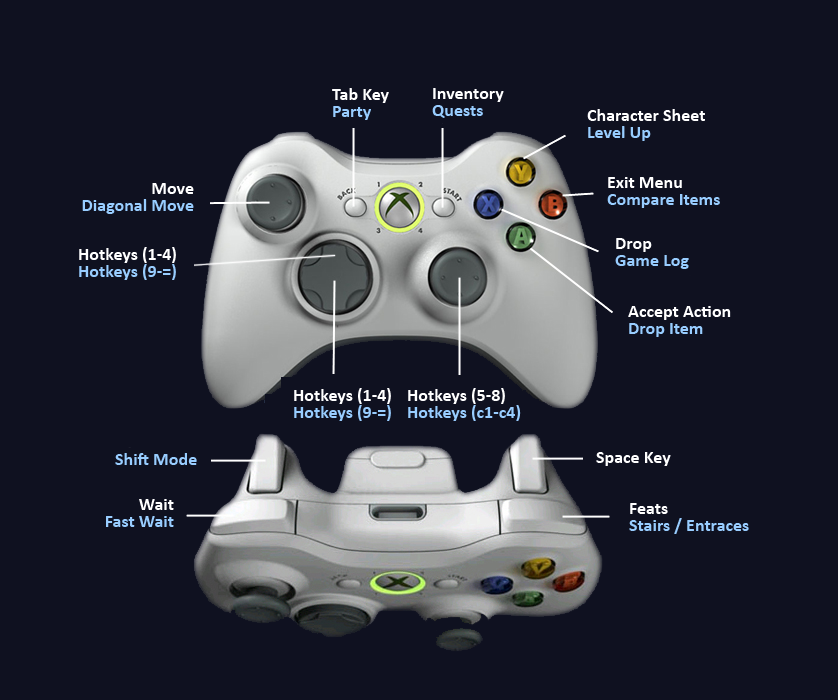
<style>
.page{position:relative;width:838px;height:700px;background:#0f1120}
.page>*{position:absolute;margin:0}
.t1{font:18px/17px "Calibri-Bold";color:#ffffff}
.t2{font:18px/17px "Calibri-Bold";color:#98cdff}
.t3{font:18px "Calibri-Bold";color:#98cdff}
.t4{font:18px "Calibri-Bold";color:#ffffff}
</style>
<div class="page">
<p class="t1" style="left:332px;top:88px;width:57px;height:32px">Tab Key<br><span class="t2">Party</span></p>
<p class="t1" style="left:432px;top:88px;width:72px;height:30px">Inventory<br><span class="t2">Quests</span></p>
<p class="t1" style="left:587px;top:109px;width:118px;height:32px">Character Sheet<br><span class="t2">Level Up</span></p>
<p class="t2" style="left:82px;top:183px;width:112px;height:31px;text-align:right"><span class="t1">Move<br></span>Diagonal Move</p>
<p class="t2" style="left:607px;top:177px;width:113px;height:31px"><span class="t1">Exit Menu<br></span>Compare Items</p>
<p class="t2" style="left:615px;top:238px;width:74px;height:31px"><span class="t1">Drop<br></span>Game Log</p>
<p class="t1" style="left:79px;top:247px;width:97px;height:33px">Hotkeys (1-4)<br><span class="t2">Hotkeys (9-=)</span></p>
<p class="t1" style="left:628px;top:306px;width:103px;height:31px">Accept Action<br><span class="t2">Drop Item</span></p>
<p class="t1" style="left:294px;top:388px;width:97px;height:33px">Hotkeys (1-4)<br><span class="t2">Hotkeys (9-=)</span></p>
<p class="t2" style="left:408px;top:388px;width:113px;height:33px"><span class="t1">Hotkeys (5-8)<br></span>Hotkeys (c1-c4)</p>
<p class="t3" style="left:115px;top:453px;width:82px;height:12px"><span class="t4"><br></span>Shift Mode</p>
<p class="t4" style="left:596px;top:452px;width:75px;height:14px">Space Key</p>
<p class="t2" style="left:106px;top:499px;width:68px;height:28px;text-align:right"><span class="t1">Wait<br></span>Fast Wait</p>
<p class="t2" style="left:629px;top:503px;width:120px;height:31px"><span class="t1">Feats<br></span>Stairs / Entraces</p>
</div>
